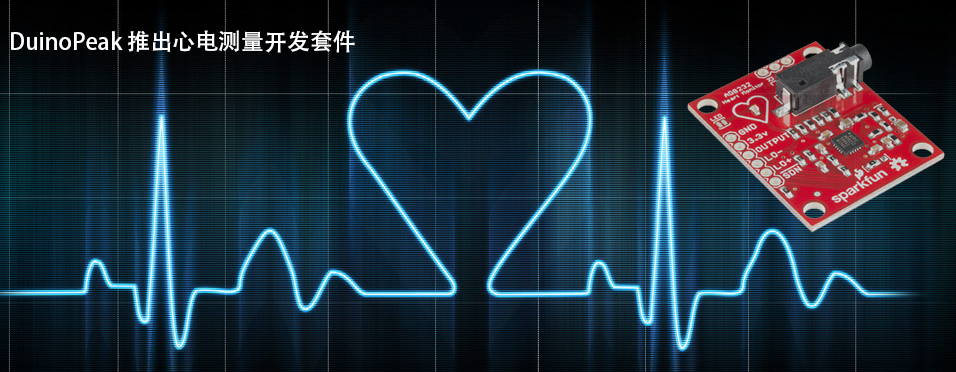
<style>
.page{position:relative;width:956px;height:372px}
.page>*{position:absolute;margin:0}
.t1{font:22.8px "AdobeHeitiStd-Regular";color:#ffffff}
</style>
<div class="page">
<p class="t1" style="left:11px;top:30px;width:344px;height:23px">DuinoPeak 推出心电测量开发套件</p>
</div>
